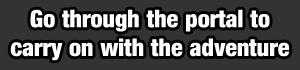
<style>
.page{position:relative;width:300px;height:70px;background:#333333}
.page>*{position:absolute;margin:0}
.t1{font:24px "Harvest";color:#ffffff}
</style>
<div class="page">
<p class="t1" style="left:10px;top:9px;width:280px;height:52px;text-align:center">Go through the portal to <br>carry on with the adventure</p>
</div>
